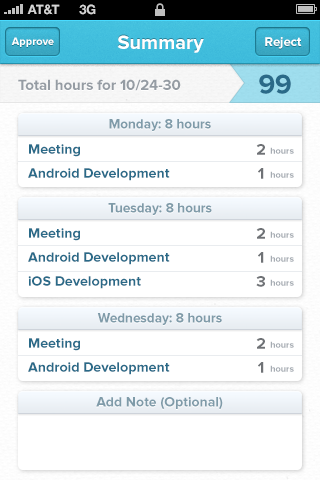
<style>
.page{position:relative;width:320px;height:480px;background:#ffffff}
.page>*{position:absolute;margin:0}
.t1{font:13px "HelveticaNeue-Bold";color:#d4d4d4;text-transform:uppercase}
.t2{font:11px "ProximaNova-Bold";color:#ffffff}
.t3{font:20px "ProximaNova-Bold";color:#ffffff}
.t4{font:13px "ProximaNova-Bold";color:#ffffff}
.t5{font:28.2px "ProximaNova-Bold";color:#2a6a88;scale:0.97 1}
.t6{font:15px "ProximaNova-Bold";color:#959ca3}
.t7{font:14px "ProximaNova-Bold";color:#7f9ba9;scale:0.97 1}
.t8{font:14px/12px "ProximaNova-Bold";color:#2a6a88}
.t9{font:16px/12px "ProximaNova-Bold";color:#6f7276}
.t10{font:9px/12px "ProximaNova-Bold";color:#a6acb3}
.t11{font:14px "ProximaNova-Bold";color:#7f9ba9}
</style>
<div class="page">
<p class="t1" style="left:27px;top:4px;width:33px;height:11px">AT&amp;t</p>
<p class="t1" style="left:79px;top:4px;width:17px;height:11px">3G</p>
<p class="t2" style="left:11px;top:37px;width:43px;height:10px">Approve</p>
<p class="t3" style="left:117px;top:35px;width:87px;height:18px">Summary</p>
<p class="t4" style="left:265px;top:37px;width:37px;height:12px">Reject</p>
<p class="t5" style="left:259px;top:74px;width:32px;height:20px">99</p>
<p class="t6" style="left:18px;top:79px;width:163px;height:12px">Total hours for 10/24-30</p>
<p class="t7" style="left:109px;top:119px;width:102px;height:12px">Monday: 8 hours</p>
<p class="t8" style="left:28px;top:144px;width:142px;height:37px">Meeting<br><br>Android Development</p>
<p class="t9" style="left:256px;top:144px;width:9px;height:35px;text-align:center">2<br><br>1</p>
<p class="t10" style="left:270px;top:147px;width:24px;height:31px;text-align:center">hours<br><br>hours</p>
<p class="t7" style="left:108px;top:203px;width:104px;height:12px">Tuesday: 8 hours</p>
<p class="t8" style="left:28px;top:228px;width:142px;height:61px">Meeting<br><br>Android Development<br><br>iOS Development</p>
<p class="t9" style="left:256px;top:228px;width:9px;height:59px;text-align:center">2<br><br>1<br><br>3</p>
<p class="t10" style="left:270px;top:231px;width:24px;height:55px;text-align:center">hours<br><br>hours<br><br>hours</p>
<p class="t7" style="left:97px;top:313px;width:125px;height:12px">Wednesday: 8 hours</p>
<p class="t8" style="left:28px;top:338px;width:142px;height:37px">Meeting<br><br>Android Development</p>
<p class="t9" style="left:256px;top:338px;width:9px;height:35px;text-align:center">2<br><br>1</p>
<p class="t10" style="left:270px;top:341px;width:24px;height:31px;text-align:center">hours<br><br>hours</p>
<p class="t11" style="left:96px;top:397px;width:127px;height:13px">Add Note (Optional)</p>
</div>
